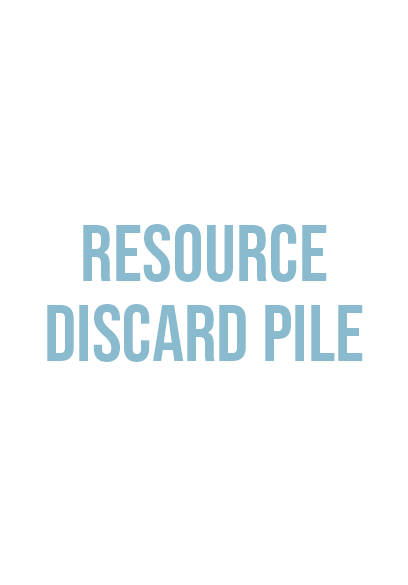
<style>
.page{position:relative;width:408px;height:585px;background:#ffffff}
.page>*{position:absolute;margin:0}
.t1{font:80px/80px "BebasNeue-Regular";color:#89bace}
</style>
<div class="page">
<p class="t1" style="left:47px;top:224px;width:316px;height:138px;text-align:center">resource<br>discard pile</p>
</div>
